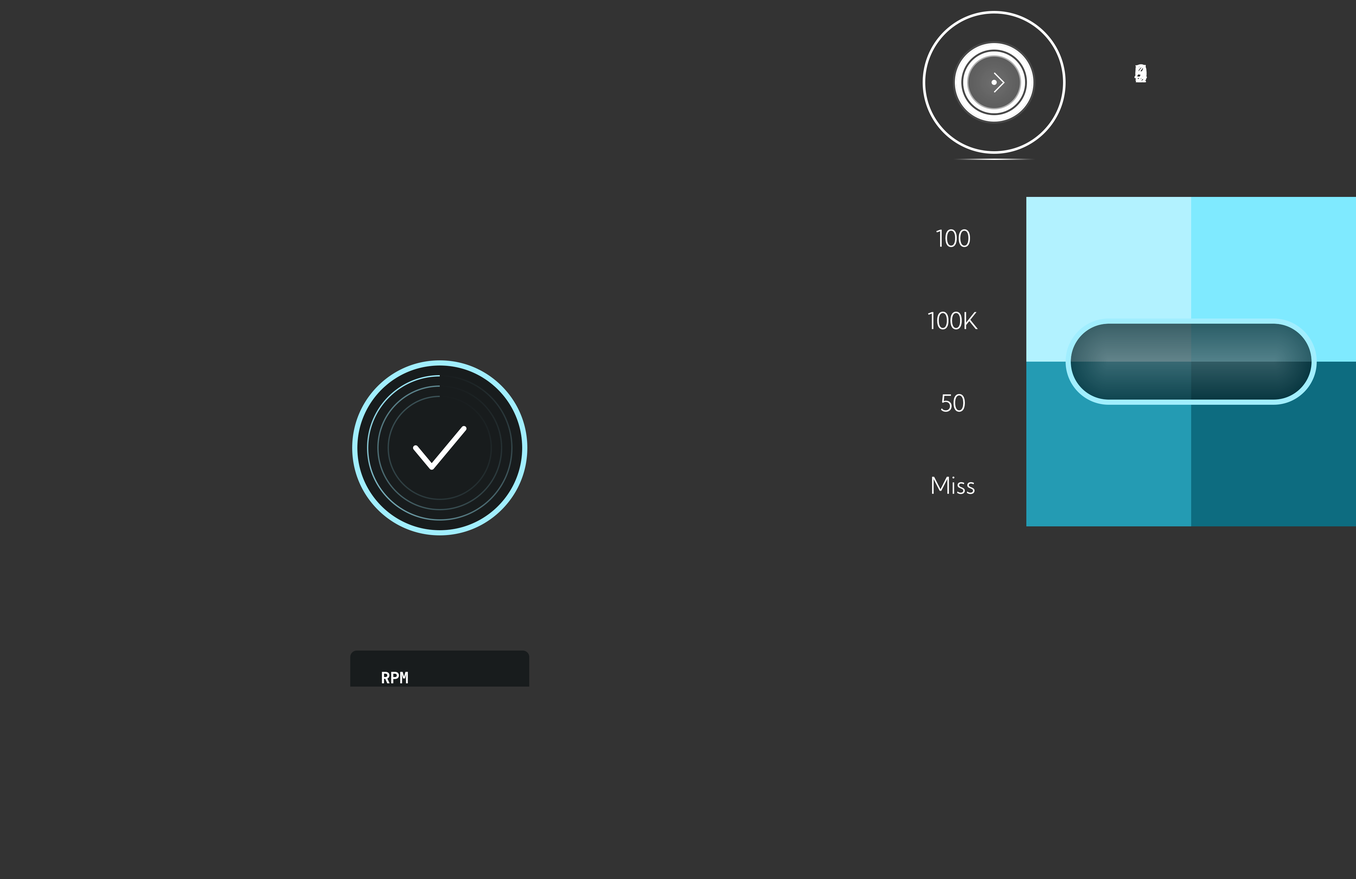
<style>
.page{position:relative;width:1356px;height:879px;background:#333333}
.page>*{position:absolute;margin:0}
.t1{font:23.2px "KumbhSans-Light";color:#ffffff}
.t2{font:15.5px "JetBrainsMono-Bold";color:#ffffff}
</style>
<div class="page">
<p class="t1" style="left:936px;top:229px;width:34px;height:18px">100</p>
<p class="t1" style="left:928px;top:312px;width:50px;height:18px">100K</p>
<p class="t1" style="left:941px;top:394px;width:24px;height:18px">50</p>
<p class="t1" style="left:932px;top:477px;width:42px;height:17px">Miss</p>
<p class="t2" style="left:382px;top:672px;width:26px;height:12px">RPM</p>
</div>
